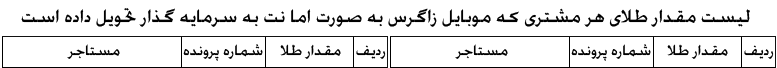
<style>
.page{position:relative;width:777px;height:68px;background:#ffffff}
.page>*{position:absolute;margin:0}
.t1{font:24px "Airstream";color:#000000}
.t2{font:19.4px "Airstream";color:#000000}
</style>
<div class="page">
<p class="t1" style="left:21px;top:8px;width:729px;height:19px">لیست مقدار طلای هر مشتری که موبایل زاگرس به صورت اما نت به سرمایه گذار تحویل داده است</p>
<p class="t2" style="left:67px;top:44px;width:53px;height:15px">مستاجر</p>
<p class="t2" style="left:183px;top:44px;width:80px;height:17px">شماره پرونده</p>
<p class="t2" style="left:280px;top:44px;width:61px;height:15px">مقدار طلا</p>
<p class="t2" style="left:356px;top:45px;width:30px;height:14px">ردیف</p>
<p class="t2" style="left:455px;top:44px;width:53px;height:15px">مستاجر</p>
<p class="t2" style="left:571px;top:44px;width:80px;height:17px">شماره پرونده</p>
<p class="t2" style="left:667px;top:44px;width:61px;height:15px">مقدار طلا</p>
<p class="t2" style="left:744px;top:45px;width:30px;height:14px">ردیف</p>
</div>
